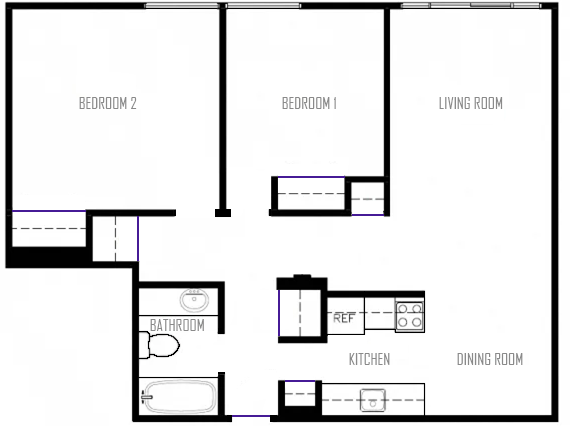
<style>
.page{position:relative;width:570px;height:426px;background:#ffffff}
.page>*{position:absolute;margin:0}
.t1{font:16px "AgencyFB-Reg";color:#8a8a8a}
</style>
<div class="page">
<p class="t1" style="left:79px;top:97px;width:58px;height:12px">BEDROOM 2</p>
<p class="t1" style="left:282px;top:97px;width:54px;height:12px">BEDROOM 1</p>
<p class="t1" style="left:439px;top:97px;width:64px;height:12px">LIVING ROOM</p>
<p class="t1" style="left:150px;top:319px;width:54px;height:12px">BATHROOM</p>
<p class="t1" style="left:349px;top:353px;width:41px;height:12px">KITCHEN</p>
<p class="t1" style="left:457px;top:353px;width:66px;height:12px">DINING ROOM</p>
</div>
